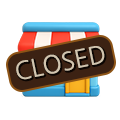
<style>
.page{position:relative;width:120px;height:120px;background:#ffffff}
.page>*{position:absolute;margin:0}
.t1{font:24.5px "NanumGothic";color:#d2c5af}
</style>
<div class="page">
<p class="t1" style="left:16px;top:46px;width:89px;height:34px;rotate:-12deg">CLOSED</p>
</div>
